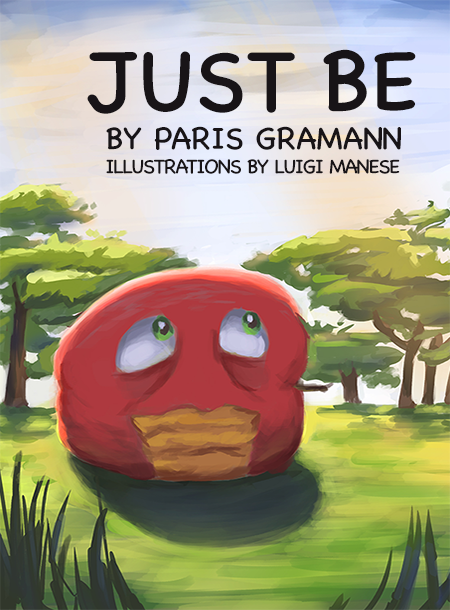
<style>
.page{position:relative;width:450px;height:610px}
.page>*{position:absolute;margin:0}
.t1{font:20.3px "ChalkboardSE-Regular";letter-spacing:-0.06em;color:#181417}
.t2{font:88.3px "ChalkboardSE-Regular";color:#181417}
.t3{font:31.7px "ChalkboardSE-Regular";color:#181417}
.t4{font:31.7px "ChalkboardSE-Regular";letter-spacing:-0.06em;color:#181417}
</style>
<div class="page">
<p class="t1" style="left:87px;top:49px;width:329px;height:125px;text-align:center"><span class="t2">JUST BE<br></span><span class="t3">BY PARIS GRAMA</span><span class="t4">NN<br></span>ILLUSTRATIONS BY LUIGI MANESE</p>
</div>
